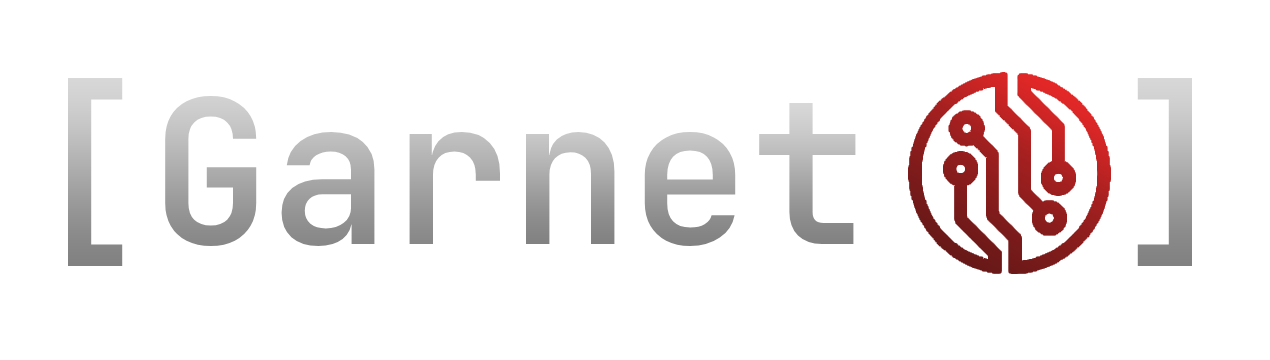
<style>
.page{position:relative;width:1270px;height:360px;background:#ffffff}
.page>*{position:absolute;margin:0}
.t1{font:200px "JetBrainsMono-SemiBold"}
</style>
<div class="page">
<p class="t1" style="left:68px;top:78px;width:1124px;height:188px">[Gar     ]</p>
<p class="t1" style="left:526px;top:103px;width:330px;height:143px">net</p>
</div>
